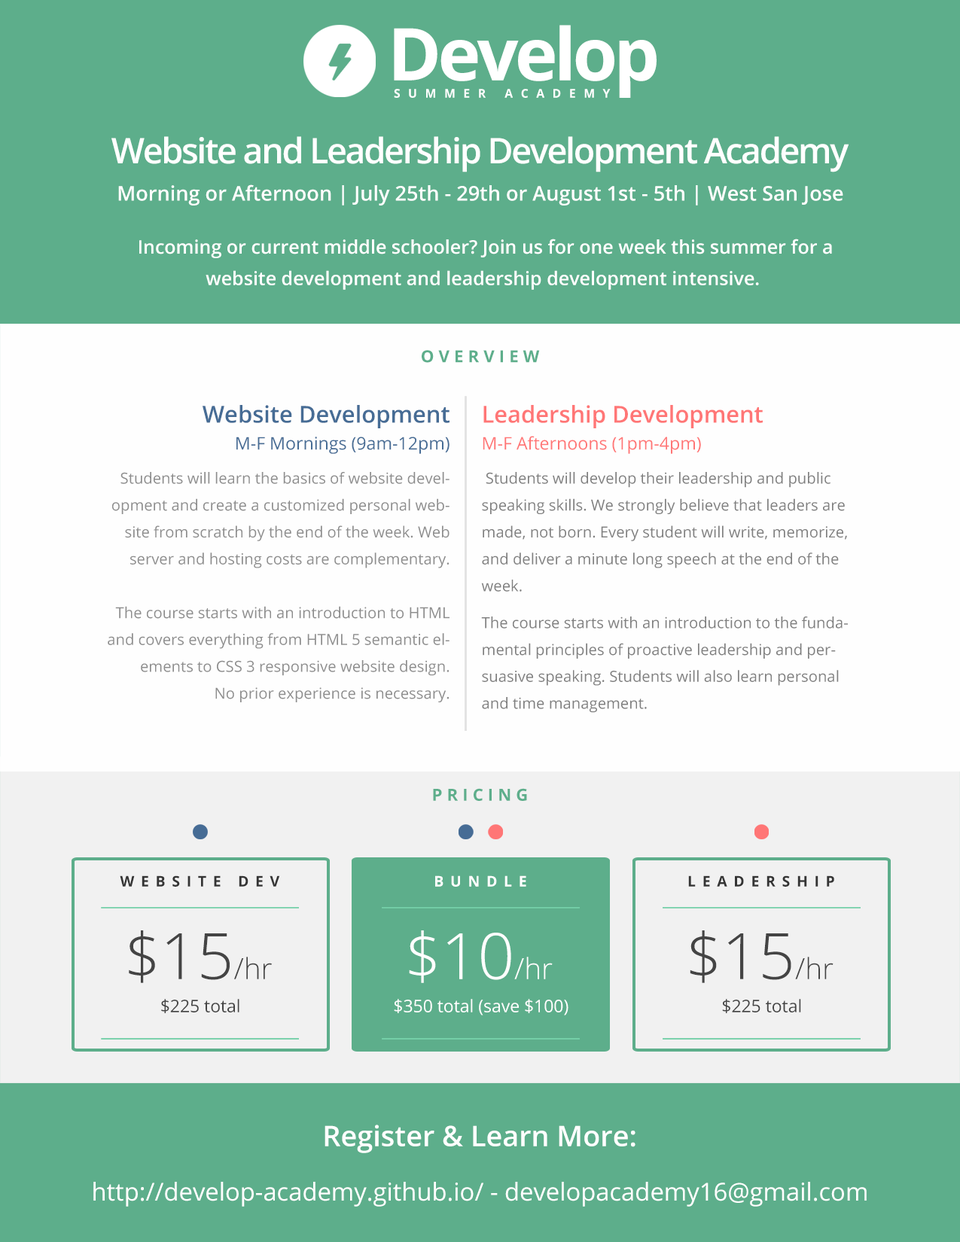
<style>
.page{position:relative;width:960px;height:1242px;background:#5dae8b}
.page>*{position:absolute;margin:0}
.t1{font:72.6px "OpenSans-Bold";letter-spacing:-0.05em;color:#ffffff}
.t2{font:12px "OpenSans-Bold";letter-spacing:0.67em;color:#ffffff}
.t3{font:35.1px "OpenSans-Semibold";letter-spacing:-0.05em;color:#ffffff}
.t4{font:20.4px "OpenSans-Semibold";color:#ffffff}
.t5{font:18.8px/31.4px "OpenSans-Semibold";color:#ffffff}
.t6{font:16.6px "OpenSans-Bold";letter-spacing:0.27em;color:#5dae8b}
.t7{font:15.3px/26.9px "OpenSans";color:#8d8d8d}
.t8{font:23.3px/26.9px "OpenSans-Semibold";color:#466c95}
.t9{font:17.4px/26.9px "OpenSans";color:#466c95}
.t10{font:17.4px/7.4px "OpenSans";color:#466c95}
.t11{font:15.3px/7.4px "OpenSans";color:#8d8d8d}
.t12{font:15.3px/26.9px "OpenSans";color:#7f7f7f}
.t13{font:23.3px/26.9px "OpenSans-Semibold";color:#ff7676}
.t14{font:17.4px/26.9px "OpenSans";color:#ff7676}
.t15{font:17.4px/7.4px "OpenSans";color:#ff7676}
.t16{font:15.3px/7.4px "OpenSans";color:#7f7f7f}
.t17{font:15.3px/10px "OpenSans";color:#7f7f7f}
.t18{font:14.7px "OpenSans-Bold";letter-spacing:0.44em;color:#343434}
.t19{font:14.7px "OpenSans-Bold";letter-spacing:0.44em;color:#ffffff}
.t20{font:64.3px "OpenSans-Light";color:#444444}
.t21{font:29.1px "OpenSans-Light";color:#444444}
.t22{font:64.3px "OpenSans-Light";color:#ffffff}
.t23{font:29.1px "OpenSans-Light";color:#ffffff}
.t24{font:17.3px "OpenSans";color:#444444}
.t25{font:17.3px "OpenSans";color:#ffffff}
.t26{font:28.5px "OpenSans-Semibold";color:#ffffff}
.t27{font:24.7px "OpenSans";color:#ffffff}
</style>
<div class="page">
<p class="t1" style="left:394px;top:25px;width:263px;height:73px">Develop</p>
<p class="t2" style="left:394px;top:89px;width:217px;height:9px">SUMMER ACADEMY</p>
<p class="t3" style="left:111px;top:136px;width:738px;height:36px">Website and Leadership Development Academy</p>
<p class="t4" style="left:118px;top:184px;width:725px;height:22px">Morning or Afternoon | July 25th - 29th or August 1st - 5th | West San Jose</p>
<p class="t5" style="left:139px;top:239px;width:693px;height:51px;text-align:center">Incoming or current middle schooler? Join us for one week this summer for a<br>website development and leadership development intensive.</p>
<p class="t6" style="left:422px;top:350px;width:118px;height:13px">OVERVIEW</p>
<p class="t7" style="left:108px;top:405px;width:341px;height:297px;text-align:right"><span class="t8">Website Development<br></span><span class="t9">M-F Mornings (9am-</span><span class="t10">12pm)<br><br></span><span class="t11"> Students will learn the basics of website deve</span>lopment and create a customized personal website from scratch by the end of the week. Web server and hosting costs are complementary.<br><br>The course starts with an introduction to HTML and covers everything from HTML 5 semantic elements to CSS 3 responsive website design.<br>No prior experience is necessary.</p>
<p class="t12" style="left:481px;top:405px;width:367px;height:308px"><span class="t13">Leadership Development<br></span><span class="t14">M-F Afternoons (1p</span><span class="t15">m-4pm)<br><br></span><span class="t16"> Students will develop t</span>heir leadership and public speaking skills. We strongly believe that leaders are made, not born. Every student will write, memorize, and deliver a minute long speech at the end of the week.<span class="t17"><br><br>The cou</span>rse starts with an introduction to the fundamental principles of proactive leadership and persuasive speaking. Students will also learn personal and time management.</p>
<p class="t6" style="left:433px;top:788px;width:94px;height:13px">PRICING</p>
<p class="t18" style="left:120px;top:876px;width:160px;height:11px">WEBSITE DEV</p>
<p class="t19" style="left:435px;top:876px;width:91px;height:11px">BUNDLE</p>
<p class="t18" style="left:688px;top:876px;width:146px;height:11px">LEADERSHIP</p>
<p class="t20" style="left:129px;top:931px;width:143px;height:52px">$15<span class="t21">/hr</span></p>
<p class="t22" style="left:409px;top:931px;width:144px;height:52px">$10<span class="t23">/hr</span></p>
<p class="t20" style="left:690px;top:931px;width:143px;height:52px">$15<span class="t21">/hr</span></p>
<p class="t24" style="left:161px;top:999px;width:78px;height:14px">$225 total</p>
<p class="t25" style="left:394px;top:999px;width:174px;height:17px">$350 total (save $100)</p>
<p class="t24" style="left:722px;top:999px;width:79px;height:14px">$225 total</p>
<p class="t26" style="left:324px;top:1125px;width:311px;height:28px">Register &amp; Learn More:</p>
<p class="t27" style="left:93px;top:1182px;width:774px;height:25px">http://develop-academy.github.io/ - developacademy16@gmail.com</p>
</div>
